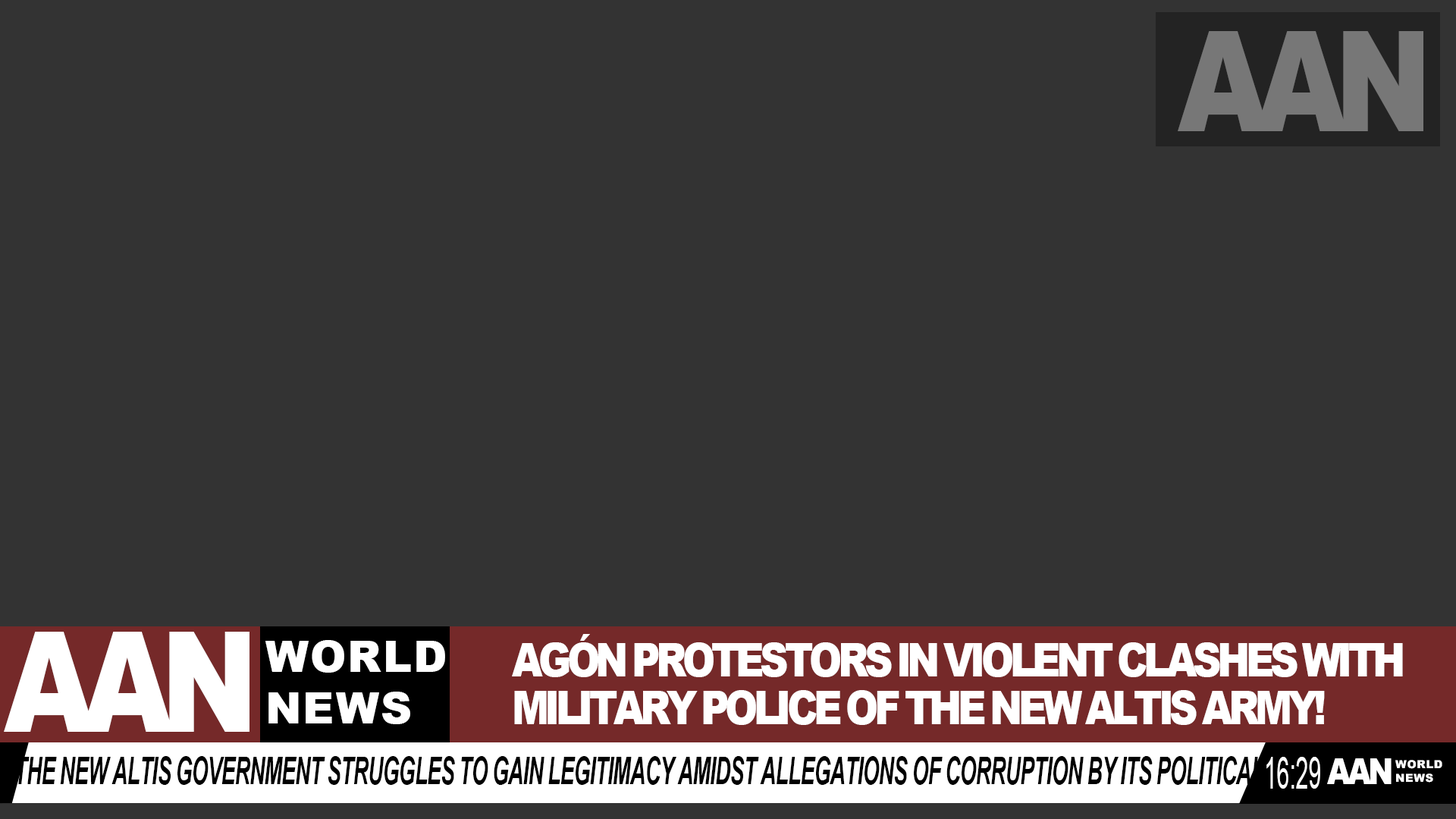
<style>
.page{position:relative;width:1456px;height:819px;background:#333333}
.page>*{position:absolute;margin:0}
.t1{font:140.1px "Arial-Black";letter-spacing:-0.14em;color:#777777;text-transform:uppercase;scale:0.83 1}
.t2{font:140.1px "Arial-Black";letter-spacing:-0.14em;color:#ffffff;text-transform:uppercase;scale:0.83 1}
.t3{font:43.2px "Arial-Black";color:#ffffff;text-transform:uppercase}
.t4{font:47.3px "Arial-Black";letter-spacing:-0.14em;color:#ffffff;text-transform:uppercase;scale:0.83 1}
.t5{font:37.8px "Arial-BoldItalicMT";letter-spacing:-0.06em;color:#000000;text-transform:uppercase;scale:0.56 1}
.t6{font:45.5px "ArialMT";color:#ffffff;text-transform:uppercase;scale:0.5 1}
.t7{font:36.2px "Arial-Black";letter-spacing:-0.14em;color:#ffffff;text-transform:uppercase;scale:0.84 1}
.t8{font:11.2px "Arial-Black";color:#ffffff;text-transform:uppercase}
</style>
<div class="page">
<p class="t1" style="left:1178px;top:31px;width:245px;height:100px">AAN</p>
<p class="t2" style="left:4px;top:632px;width:245px;height:100px">AAN</p>
<p class="t3" style="left:265px;top:640px;width:180px;height:84px">WORLD<br>NEWS</p>
<p class="t4" style="left:512px;top:634px;width:891px;height:91px">AGÓN PROTESTORS IN VIOLENT CLASHES WITH MILITARY POLICE OF THE NEW ALTIS ARMY!</p>
<p class="t5" style="left:17px;top:756px;width:1246px;height:29px">The New Altis Government struggles to gain legitimacy amidst allegations of corruption by its political</p>
<p class="t6" style="left:1266px;top:757px;width:54px;height:32px">16:29</p>
<p class="t7" style="left:1327px;top:758px;width:65px;height:26px">AAN</p>
<p class="t8" style="left:1395px;top:760px;width:47px;height:23px">WORLD<br>NEWS</p>
</div>
